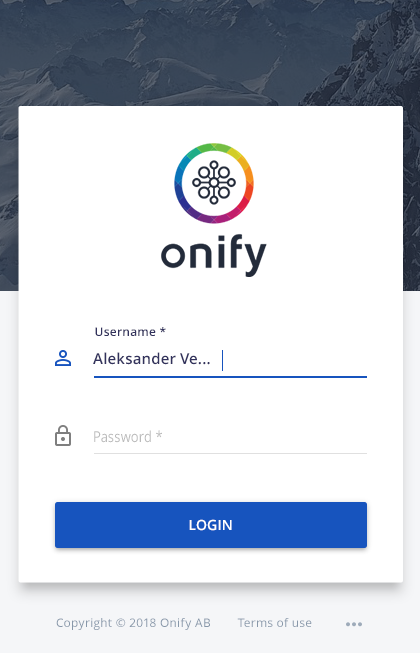
<style>
.page{position:relative;width:420px;height:653px;background:#ffffff}
.page>*{position:absolute;margin:0}
.t1{font:12px "OpenSans-Semibold";letter-spacing:0.02em;color:#32325d}
.t2{font:15px "OpenSans-Semibold";letter-spacing:0.01em;color:#32325d}
.t3{font:15.1px "OpenSans";letter-spacing:0.01em;color:#bbbbbb;scale:0.86 1}
.t4{font:14px "OpenSans-Semibold";letter-spacing:0.01em;color:#ffffff;text-transform:uppercase}
.t5{font:12px "OpenSans";letter-spacing:0.02em;color:#8898aa}
</style>
<div class="page">
<p class="t1" style="left:95px;top:327px;width:71px;height:9px">Username *</p>
<p class="t2" style="left:93px;top:352px;width:117px;height:13px">Aleksander Ve...</p>
<p class="t3" style="left:94px;top:430px;width:68px;height:13px">Password *</p>
<p class="t4" style="left:189px;top:519px;width:43px;height:12px">login</p>
<p class="t5" style="left:56px;top:618px;width:256px;height:12px">Copyright © 2018 Onify AB        Terms of use</p>
</div>
